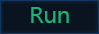
<style>
.page{position:relative;width:99px;height:34px;background:#0a1421}
.page>*{position:absolute;margin:0}
.t1{font:23.3px "SegoeUISymbol";color:#19b579}
</style>
<div class="page">
<p class="t1" style="left:31px;top:7px;width:38px;height:16px">Run</p>
</div>
